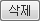
<style>
.page{position:relative;width:40px;height:21px}
.page>*{position:absolute;margin:0}
.t1{font:12px "Gulim";letter-spacing:-0.03em;color:#2c2c2c}
</style>
<div class="page">
<p class="t1" style="left:9px;top:5px;width:21px;height:11px">삭제</p>
</div>
